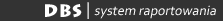
<style>
.page{position:relative;width:223px;height:21px;background:#333333}
.page>*{position:absolute;margin:0}
.t1{font:18px "LithosPro-Black";letter-spacing:0.025em;color:#ffffff}
.t2{font:14px "Corbel";color:#ffffff;font-style:italic}
.t3{font:18px "Corbel";color:#ffffff}
</style>
<div class="page">
<p class="t1" style="left:45px;top:4px;width:37px;height:14px">DBS</p>
<p class="t2" style="left:87px;top:2px;width:129px;height:17px"><span class="t3">| </span>system raportowania</p>
</div>
